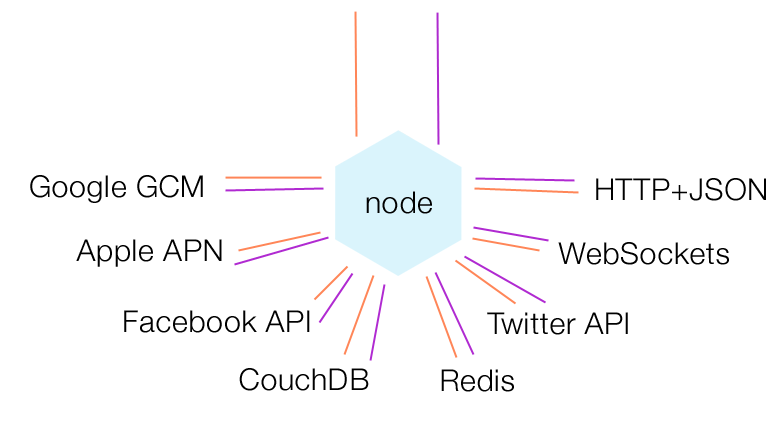
<style>
.page{position:relative;width:780px;height:432px;background:#ffffff}
.page>*{position:absolute;margin:0}
.t1{font:30px "HelveticaNeue-Light";letter-spacing:0.02em;color:#000000}
</style>
<div class="page">
<p class="t1" style="left:30px;top:175px;width:173px;height:28px">Google GCM</p>
<p class="t1" style="left:596px;top:178px;width:170px;height:23px">HTTP+JSON</p>
<p class="t1" style="left:366px;top:191px;width:66px;height:23px">node</p>
<p class="t1" style="left:76px;top:239px;width:146px;height:28px">Apple APN</p>
<p class="t1" style="left:558px;top:242px;width:171px;height:23px">WebSockets</p>
<p class="t1" style="left:124px;top:310px;width:186px;height:23px">Facebook API</p>
<p class="t1" style="left:487px;top:312px;width:141px;height:23px">Twitter API</p>
<p class="t1" style="left:239px;top:368px;width:130px;height:23px">CouchDB</p>
<p class="t1" style="left:441px;top:369px;width:73px;height:23px">Redis</p>
</div>
